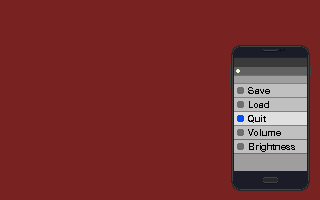
<style>
.page{position:relative;width:320px;height:200px;background:#782222}
.page>*{position:absolute;margin:0}
.t1{font:9.5px "HelveticaNeue";color:#000000;scale:0.97 1}
.t2{font:9.5px "HelveticaNeue";letter-spacing:0.06em;color:#000000;scale:0.97 1}
.t3{font:9.5px "HelveticaNeue";letter-spacing:0.02em;color:#000000;scale:0.97 1}
.t4{font:9.5px "HelveticaNeue";letter-spacing:0.13em;color:#000000;scale:0.97 1}
.t5{font:9.5px "HelveticaNeue";letter-spacing:0.01em;color:#000000;scale:0.97 1}
.t6{font:9.5px "HelveticaNeue";letter-spacing:0.02em;color:#000000}
</style>
<div class="page">
<p class="t1" style="left:248px;top:87px;width:22px;height:7px">Save</p>
<p class="t2" style="left:249px;top:101px;width:20px;height:7px">Lo<span class="t1">a</span>d</p>
<p class="t3" style="left:248px;top:115px;width:18px;height:8px">Quit</p>
<p class="t3" style="left:248px;top:129px;width:33px;height:7px">Vo<span class="t2">l</span><span class="t4">u</span><span class="t5">m</span>e</p>
<p class="t6" style="left:249px;top:143px;width:46px;height:9px">Brightness</p>
</div>
